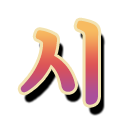
<style>
.page{position:relative;width:128px;height:128px;background:#ffffff}
.page>*{position:absolute;margin:0}
.t1{font:94px "SDKukdetopokki-aLt";letter-spacing:0.12em;font-weight:bold}
</style>
<div class="page">
<p class="t1" style="left:20px;top:20px;width:79px;height:85px">시</p>
</div>
